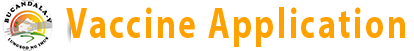
<style>
.page{position:relative;width:414px;height:51px;background:#ffffff}
.page>*{position:absolute;margin:0}
.t1{font:43.3px "MyriadPro-Bold";letter-spacing:0.075em;color:#ffa200;scale:0.78 1}
</style>
<div class="page">
<p class="t1" style="left:66px;top:7px;width:339px;height:40px">Vaccine Application</p>
</div>
